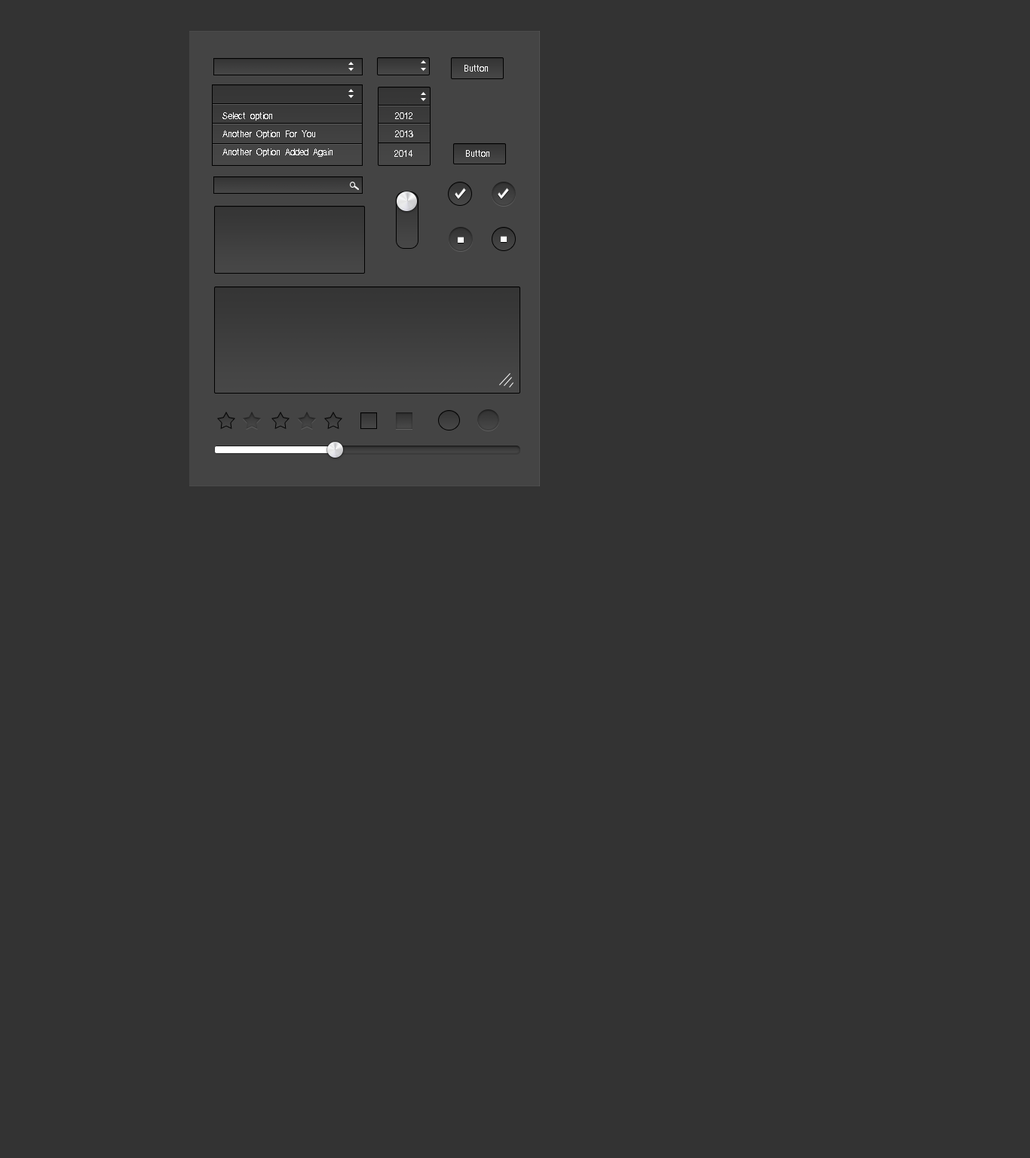
<style>
.page{position:relative;width:1030px;height:1158px;background:#333333}
.page>*{position:absolute;margin:0}
.t1{font:9px "ÈÞ¸Õ°íµñ";color:#ffffff}
.t2{font:9px/18.1px "ÈÞ¸Õ°íµñ";color:#ffffff}
</style>
<div class="page">
<p class="t1" style="left:464px;top:65px;width:24px;height:7px">Button</p>
<p class="t2" style="left:222px;top:112px;width:110px;height:45px">Select option<br> Another Option For You<br> Another Option Added Again</p>
<p class="t1" style="left:395px;top:112px;width:17px;height:7px">2012</p>
<p class="t1" style="left:395px;top:130px;width:18px;height:7px">2013</p>
<p class="t1" style="left:394px;top:150px;width:18px;height:7px">2014</p>
<p class="t1" style="left:466px;top:150px;width:23px;height:7px">Button</p>
</div>
